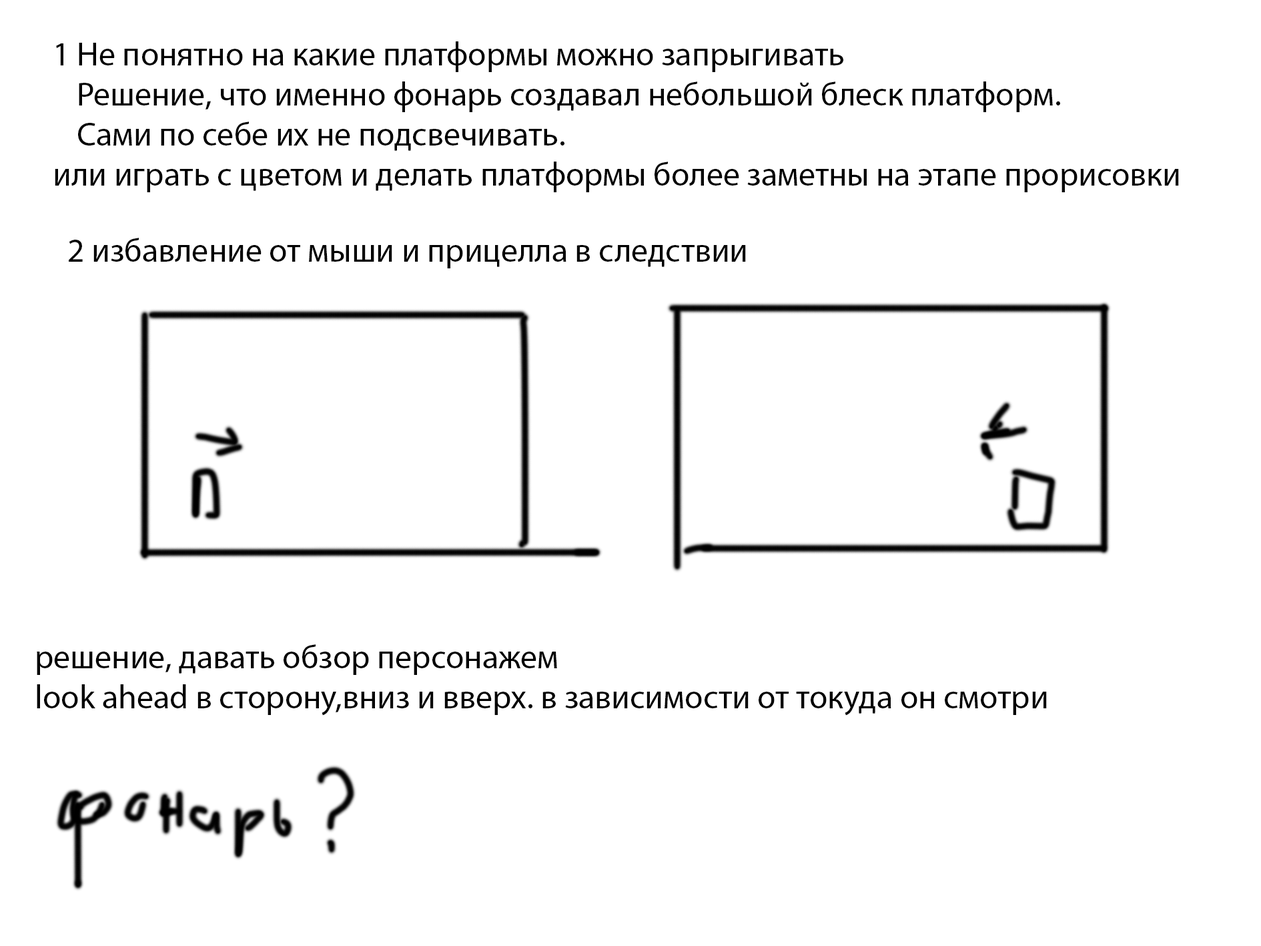
<style>
.page{position:relative;width:1261px;height:946px;background:#ffffff}
.page>*{position:absolute;margin:0}
.t1{font:33.4px "MyriadPro-Regular";color:#000000}
</style>
<div class="page">
<p class="t1" style="left:55px;top:41px;width:1124px;height:151px">1 Не понятно на какие платформы можно запрыгивать<br> Решение, что именно фонарь создавал небольшой блеск платформ.<br> Сами по себе их не подсвечивать.<br>или играть с цветом и делать платформы более заметны на этапе прорисовки</p>
<p class="t1" style="left:69px;top:238px;width:677px;height:30px">2 избавление от мыши и прицелла в следствии</p>
<p class="t1" style="left:37px;top:644px;width:1010px;height:71px">решение, давать обзор персонажем<br>look ahead в сторону,вниз и вверх. в зависимости от токуда он смотри</p>
</div>
